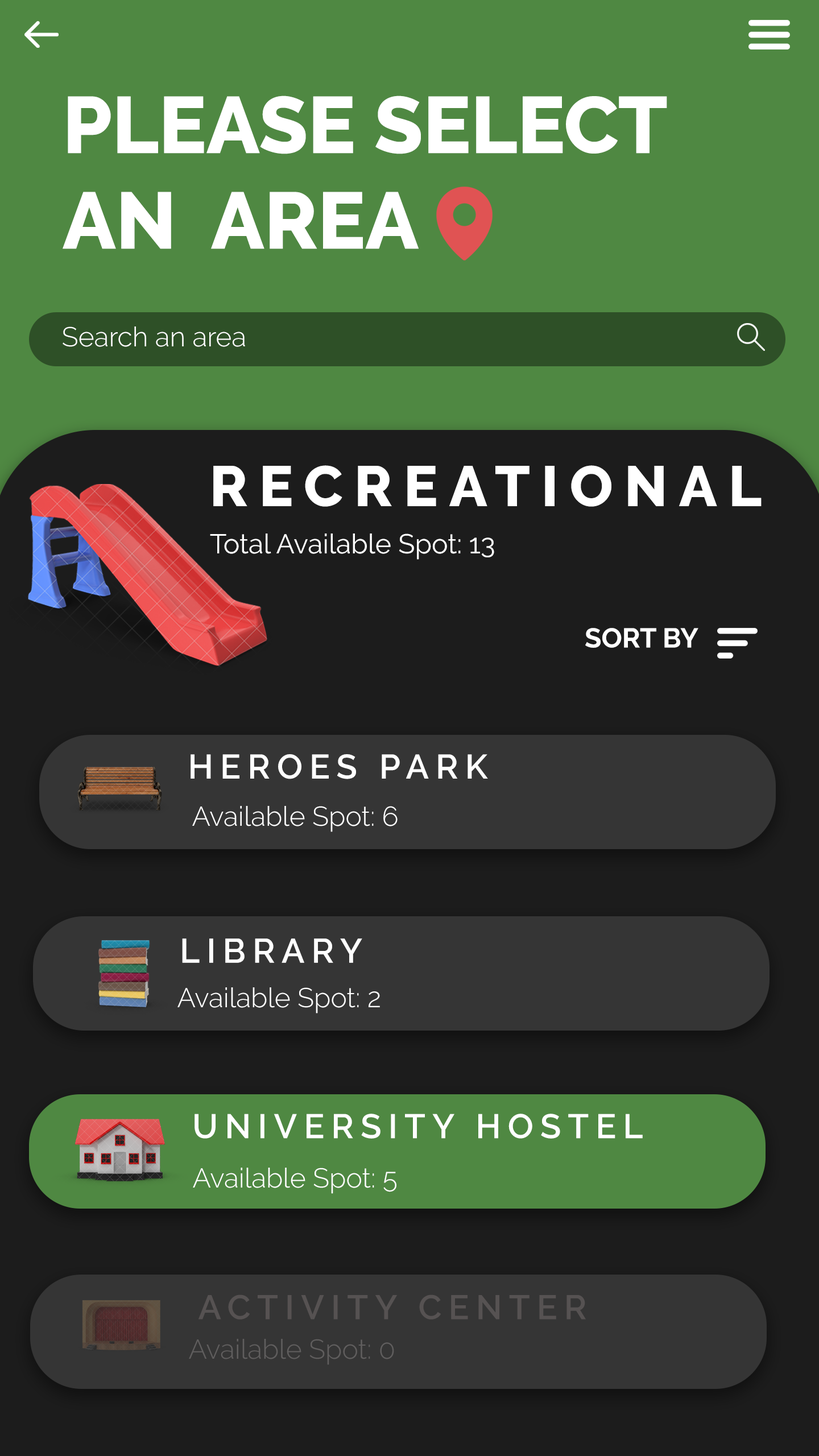
<style>
.page{position:relative;width:819px;height:1456px;background:#1c1c1c}
.page>*{position:absolute;margin:0}
.t1{font:79.6px "Raleway-ExtraBold";color:#ffffff}
.t2{font:27.3px "Raleway-Light";color:#ffffff}
.t3{font:56.9px "Raleway-ExtraBold";letter-spacing:0.2em;color:#ffffff}
.t4{font:27.3px "Raleway-Regular";color:#ffffff}
.t5{font:27.3px "Raleway-Bold";color:#ffffff}
.t6{font:34.1px "Raleway-SemiBold";letter-spacing:0.2em;color:#ffffff}
.t7{font:34.1px "Raleway-SemiBold";letter-spacing:0.2em;color:#565252}
.t8{font:27.3px "Raleway-Light";color:#605e5e}
</style>
<div class="page">
<p class="t1" style="left:63px;top:96px;width:604px;height:153px">PLEASE SELECT <br>AN  AREA</p>
<p class="t2" style="left:63px;top:326px;width:182px;height:21px">Search an area</p>
<p class="t3" style="left:213px;top:465px;width:549px;height:42px">RECREATIONAL</p>
<p class="t4" style="left:210px;top:533px;width:284px;height:27px">Total Available Spot: 13</p>
<p class="t5" style="left:585px;top:628px;width:113px;height:20px">SORT BY</p>
<p class="t6" style="left:191px;top:754px;width:297px;height:25px">HEROES PARK</p>
<p class="t2" style="left:192px;top:806px;width:206px;height:26px">Available Spot: 6</p>
<p class="t6" style="left:182px;top:938px;width:180px;height:25px">LIBRARY</p>
<p class="t2" style="left:177px;top:987px;width:203px;height:26px">Available Spot: 2</p>
<p class="t6" style="left:195px;top:1114px;width:448px;height:25px">UNIVERSITY HOSTEL</p>
<p class="t2" style="left:193px;top:1168px;width:203px;height:26px">Available Spot: 5</p>
<p class="t7" style="left:198px;top:1294px;width:388px;height:25px">ACTIVITY CENTER</p>
<p class="t8" style="left:189px;top:1339px;width:205px;height:26px">Available Spot: 0</p>
</div>
